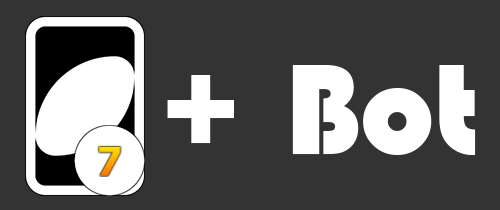
<style>
.page{position:relative;width:500px;height:210px;background:#333333}
.page>*{position:absolute;margin:0}
.t1{font:133.3px "Bauhaus93";color:#ffffff}
</style>
<div class="page">
<p class="t1" style="left:167px;top:65px;width:309px;height:90px">+ Bot</p>
</div>
